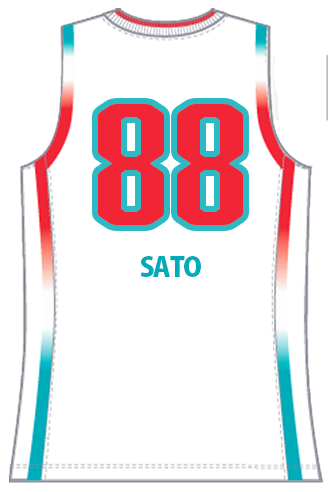
<style>
.page{position:relative;width:328px;height:492px;background:#ffffff}
.page>*{position:absolute;margin:0}
.t1{font:159.6px "Abolition-Soft";color:#f12535;scale:1.5 1}
.t2{font:27px "KozGoPr6N-Heavy";letter-spacing:-0.05em;color:#00acb9}
</style>
<div class="page">
<p class="t1" style="left:98px;top:104px;width:145px;height:121px">88</p>
<p class="t2" style="left:140px;top:256px;width:61px;height:21px">SATO</p>
</div>
